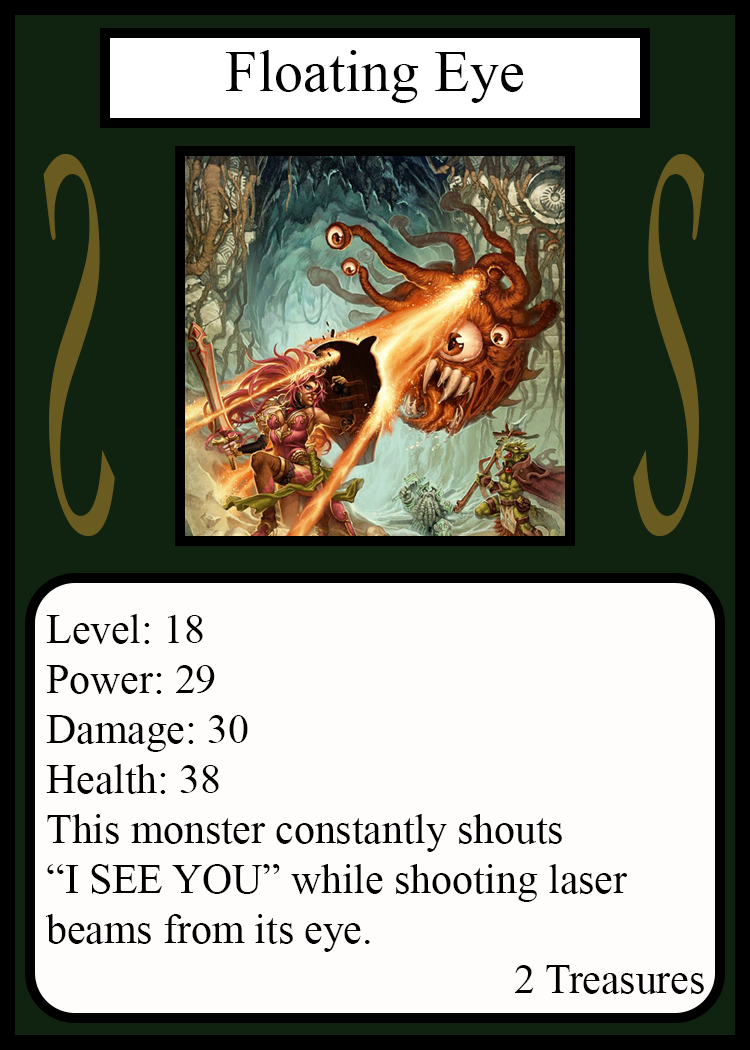
<style>
.page{position:relative;width:750px;height:1050px;background:#fffcfc}
.page>*{position:absolute;margin:0}
.t1{font:58.3px "TimesNewRomanPSMT";color:#010101}
.t2{font:548.5px "Apple-Chancery";color:#6a5c21;scale:0.27 1}
.t3{font:548.2px "Apple-Chancery";color:#6a5c21;scale:0.27 1}
.t4{font:41.7px "TimesNewRomanPSMT";color:#000000}
</style>
<div class="page">
<p class="t1" style="left:225px;top:50px;width:299px;height:53px">Floating Eye</p>
<p class="t2" style="left:43px;top:154px;width:72px;height:382px;rotate:180deg">S</p>
<p class="t3" style="left:633px;top:154px;width:72px;height:382px">S</p>
<p class="t4" style="left:45px;top:614px;width:659px;height:380px">Level: 18<br>Power: 29<br>Damage: 30<br>Health: 38<br>This monster constantly shouts<br>“I SEE YOU” while shooting laser<br>beams from its eye.<br>             2 Treasures</p>
</div>
